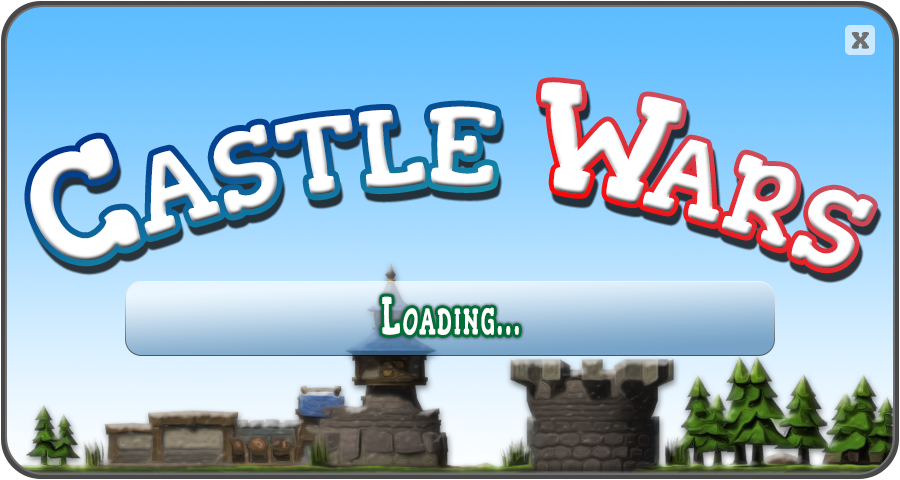
<style>
.page{position:relative;width:900px;height:480px}
.page>*{position:absolute;margin:0}
.t1{font:33.5px "Gorditas-Bold";color:#707070;font-variant:small-caps}
.t2{font:155.8px "Gorditas-Regular";letter-spacing:0.01em;color:#ffffff;font-variant:small-caps;scale:0.56 1}
.t3{font:155.8px "Gorditas-Regular";letter-spacing:-0.13em;color:#ffffff;font-variant:small-caps;scale:0.56 1}
.t4{font:155.8px "Gorditas-Regular";letter-spacing:-0.01em;color:#ffffff;font-variant:small-caps;scale:0.56 1}
.t5{font:53.1px "Gorditas-Regular";letter-spacing:0.085em;color:#ffffff;font-variant:small-caps;scale:0.56 1}
</style>
<div class="page">
<p class="t1" style="left:851px;top:32px;width:18px;height:17px">x</p>
<p class="t2" style="left:541px;top:82px;width:332px;height:187px"><span class="t3">W</span><span class="t4">a</span>rs</p>
<p class="t2" style="left:30px;top:106px;width:466px;height:155px">Castle</p>
<p class="t5" style="left:382px;top:296px;width:137px;height:39px">Loading...</p>
</div>
